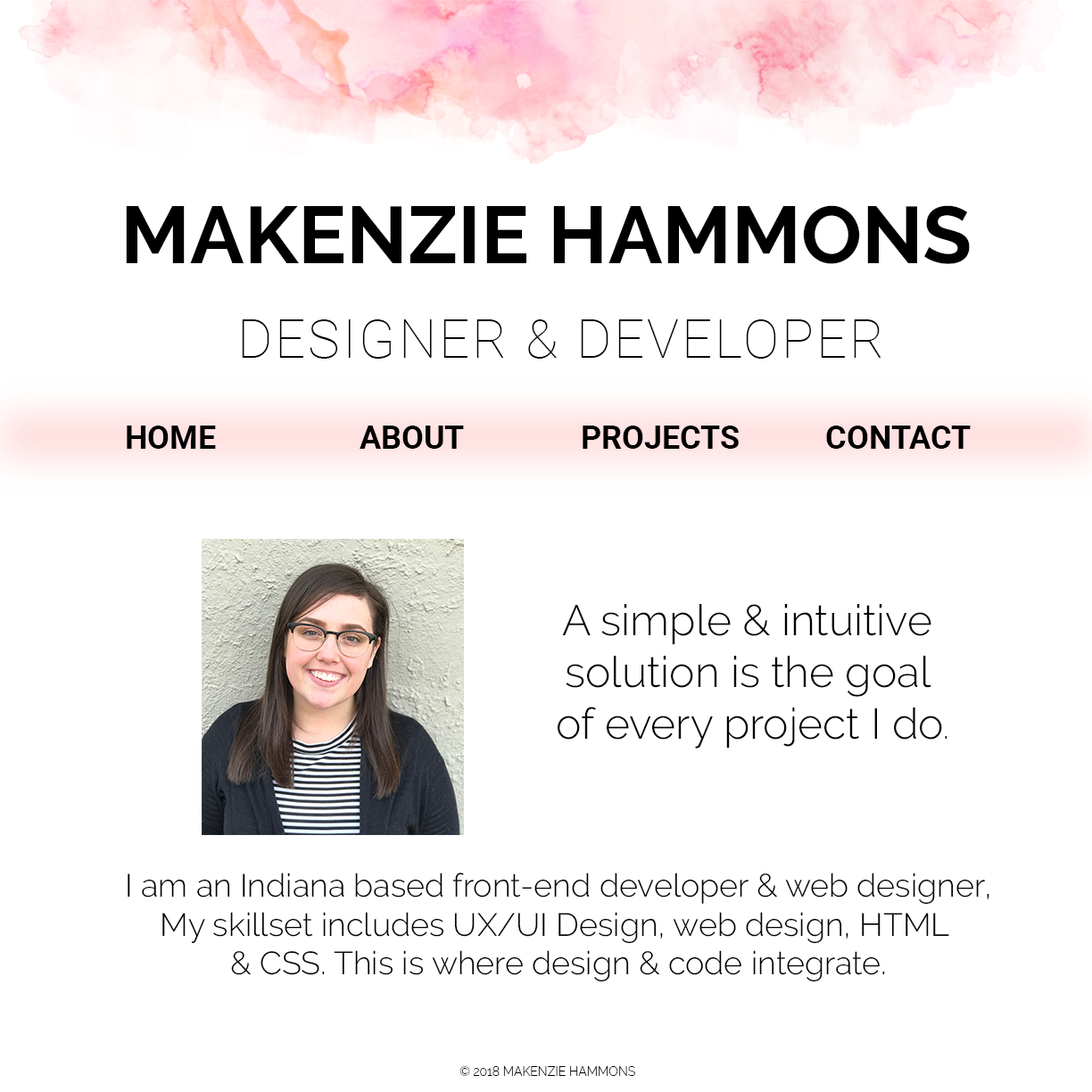
<style>
.page{position:relative;width:1092px;height:1092px;background:#ffffff}
.page>*{position:absolute;margin:0}
.t1{font:80.3px "Raleway-Bold";color:#000000}
.t2{font:53.5px "Roboto-Thin";letter-spacing:0.05em;color:#000000}
.t3{font:32.1px "Roboto-Bold";color:#000000}
.t4{font:42.8px "Raleway-Light";color:#000000}
.t5{font:32.1px "Raleway-Light";color:#000000}
.t6{font:12.5px "Raleway-Light";color:#000000}
</style>
<div class="page">
<p class="t1" style="left:126px;top:205px;width:844px;height:59px">MAKENZIE HAMMONS</p>
<p class="t2" style="left:242px;top:319px;width:639px;height:40px">DESIGNER &amp; DEVELOPER</p>
<p class="t3" style="left:127px;top:426px;width:89px;height:23px">HOME</p>
<p class="t3" style="left:360px;top:426px;width:104px;height:23px">ABOUT</p>
<p class="t3" style="left:583px;top:426px;width:156px;height:23px">PROJECTS</p>
<p class="t3" style="left:826px;top:426px;width:145px;height:23px">CONTACT</p>
<p class="t4" style="left:558px;top:604px;width:389px;height:145px;text-align:center">A simple &amp; intuitive <br>solution is the goal <br>of every project I do<span class="t5">.</span></p>
<p class="t5" style="left:128px;top:873px;width:861px;height:109px;text-align:center">I am an Indiana based front-end developer &amp; web designer,<br>My skillset includes UX/UI Design, web design, HTML <br>&amp; CSS. This is where design &amp; code integrate.</p>
<p class="t6" style="left:459px;top:1066px;width:176px;height:10px">© 2018 MAKENZIE HAMMONS</p>
</div>
